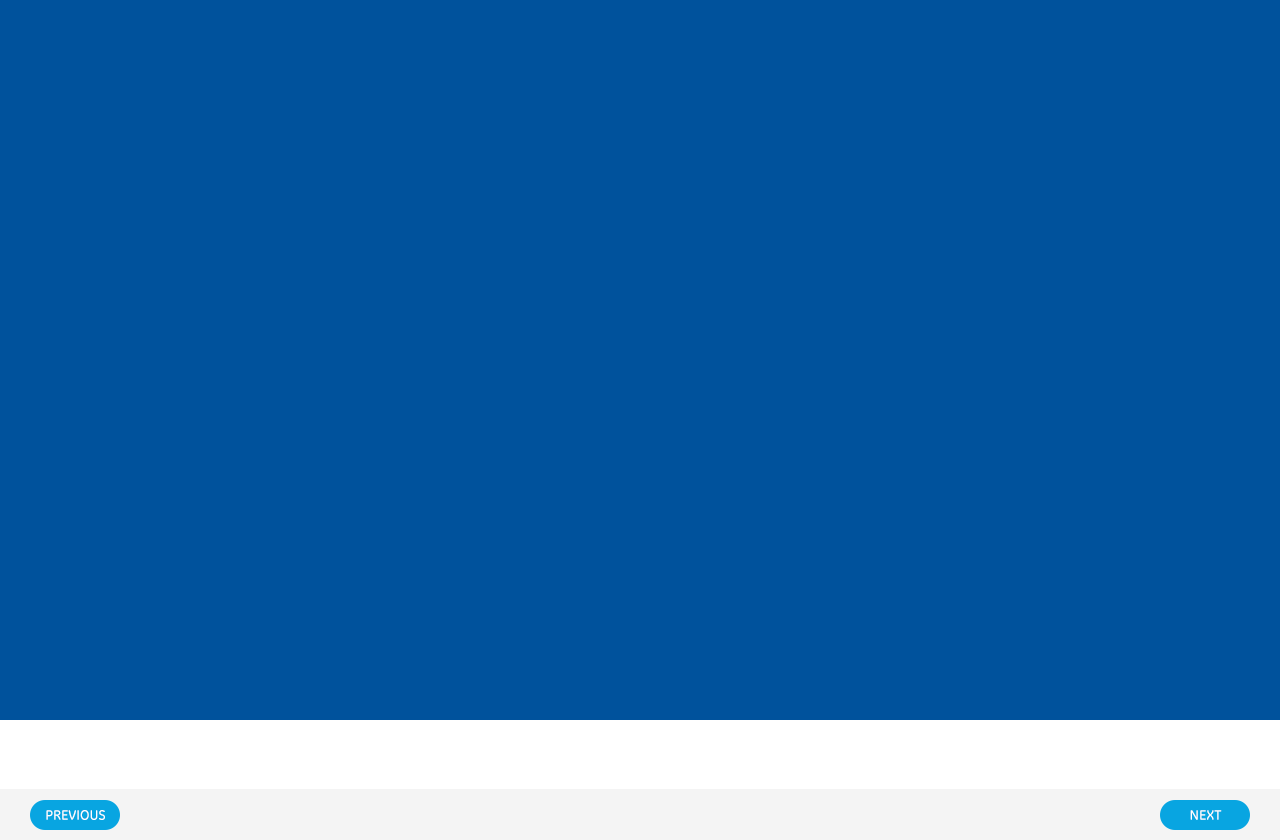
<style>
.page{position:relative;width:1280px;height:840px;background:#00529c}
.page>*{position:absolute;margin:0}
.t1{font:14px "GEInspira-Medium";color:#ffffff}
</style>
<div class="page">
<p class="t1" style="left:46px;top:810px;width:59px;height:10px">PREVIOUS</p>
<p class="t1" style="left:1190px;top:810px;width:32px;height:10px">NEXT</p>
</div>
